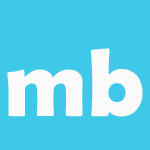
<style>
.page{position:relative;width:150px;height:150px;background:#3dc9e7}
.page>*{position:absolute;margin:0}
.t1{font:96px "BerlinSansFBDemi-Bold";color:#fbfafa}
</style>
<div class="page">
<p class="t1" style="left:7px;top:48px;width:136px;height:69px">mb</p>
</div>
